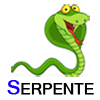
<style>
.page{position:relative;width:100px;height:100px;background:#ffffff}
.page>*{position:absolute;margin:0}
.t1{font:16.7px "Vrinda";color:#000000;font-weight:bold}
.t2{font:21.7px "Vrinda";color:#1800ff;font-weight:bold}
</style>
<div class="page">
<p class="t1" style="left:7px;top:80px;width:87px;height:15px"><span class="t2">S</span>ERPENTE</p>
</div>
